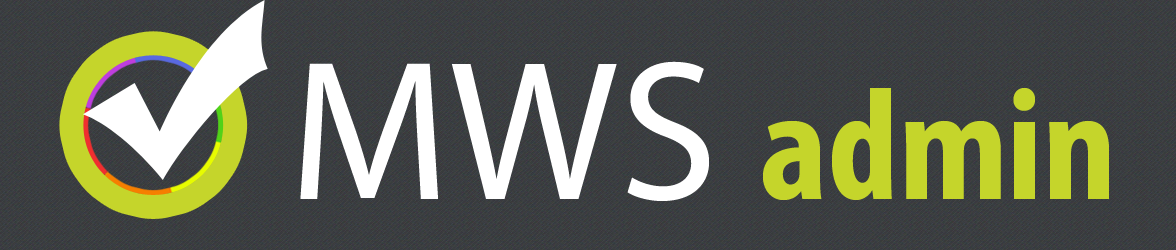
<style>
.page{position:relative;width:1176px;height:250px}
.page>*{position:absolute;margin:0}
.t1{font:160px "MyriadPro-BoldCond";color:#c5d52b}
.t2{font:200px "MyriadPro-Regular";color:#ffffff}
</style>
<div class="page">
<p class="t1" style="left:300px;top:61px;width:809px;height:140px"><span class="t2">MWS </span>admin</p>
</div>
